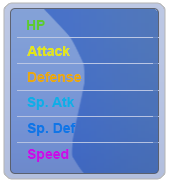
<style>
.page{position:relative;width:170px;height:180px}
.page>*{position:absolute;margin:0}
.t1{font:14px "Arial-BoldMT";color:#5dca32}
.t2{font:14px "Arial-BoldMT";color:#e4e710}
.t3{font:14px "Arial-BoldMT";color:#e7a810}
.t4{font:14px "Arial-BoldMT";color:#10ade7}
.t5{font:14px "Arial-BoldMT";color:#1075e7}
.t6{font:14px "Arial-BoldMT";color:#c610e7}
</style>
<div class="page">
<p class="t1" style="left:27px;top:20px;width:18px;height:10px">HP</p>
<p class="t2" style="left:27px;top:46px;width:43px;height:10px">Attack</p>
<p class="t3" style="left:27px;top:72px;width:55px;height:10px">Defense</p>
<p class="t4" style="left:27px;top:97px;width:48px;height:13px">Sp. Atk</p>
<p class="t5" style="left:27px;top:123px;width:49px;height:13px">Sp. Def</p>
<p class="t6" style="left:27px;top:149px;width:42px;height:13px">Speed</p>
</div>
